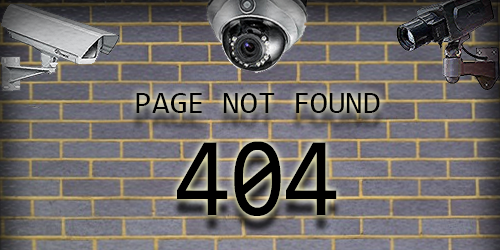
<style>
.page{position:relative;width:500px;height:250px}
.page>*{position:absolute;margin:0}
.t1{font:32px "Consolas";color:#000000}
.t2{font:113.4px "Consolas";color:#000000;scale:0.88 1}
</style>
<div class="page">
<p class="t1" style="left:136px;top:93px;width:244px;height:20px">PAGE NOT FOUND</p>
<p class="t2" style="left:177px;top:141px;width:160px;height:75px">404</p>
</div>
